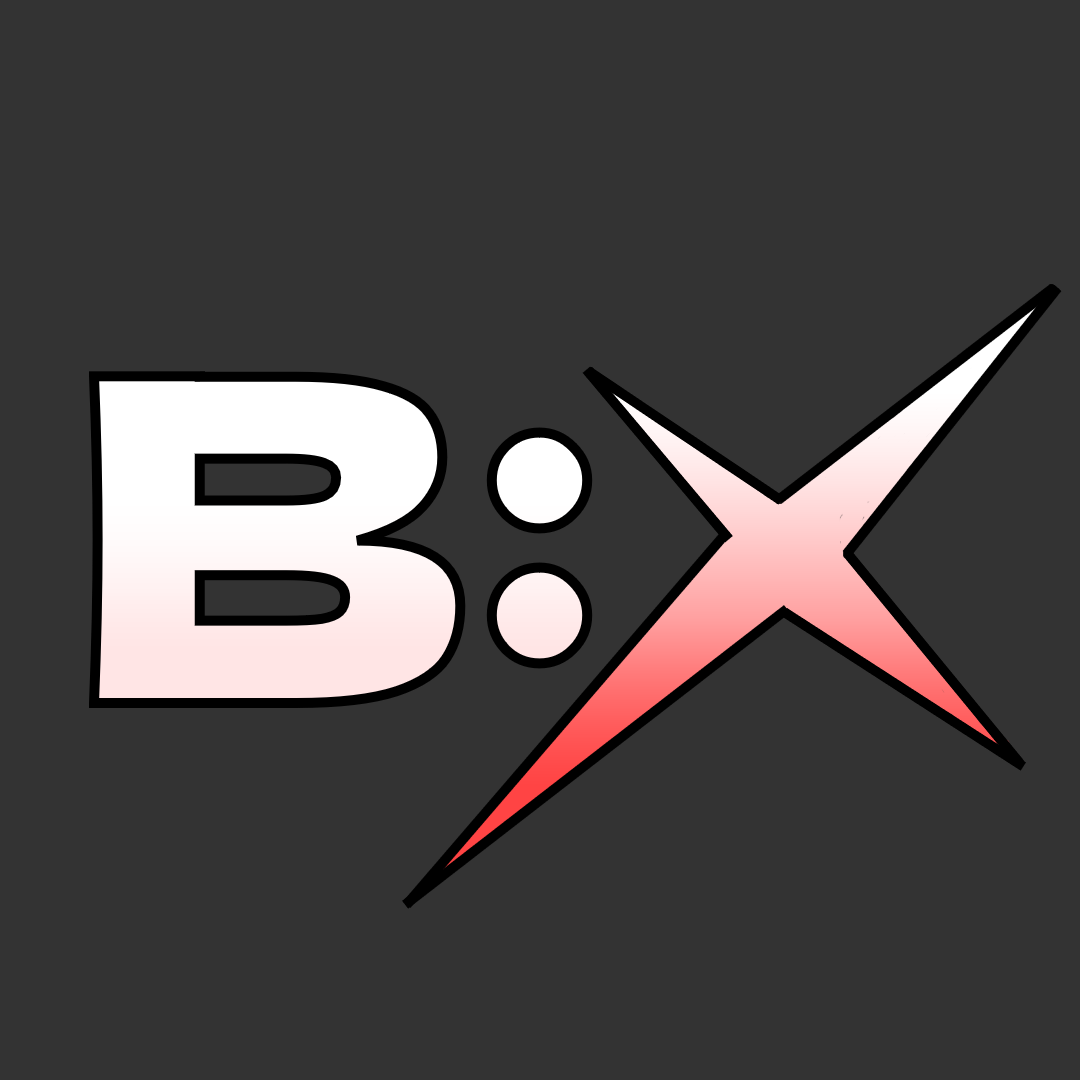
<style>
.page{position:relative;width:1080px;height:1080px;background:#333333}
.page>*{position:absolute;margin:0}
.t1{font:450px "DelaGothicOne-Regular";color:#000000}
.t2{font:450px "DelaGothicOne-Regular";color:#ffffff}
</style>
<div class="page">
<p class="t1" style="left:89px;top:371px;width:504px;height:337px">B:</p>
<p class="t2" style="left:94px;top:376px;width:494px;height:327px">B:</p>
</div>
